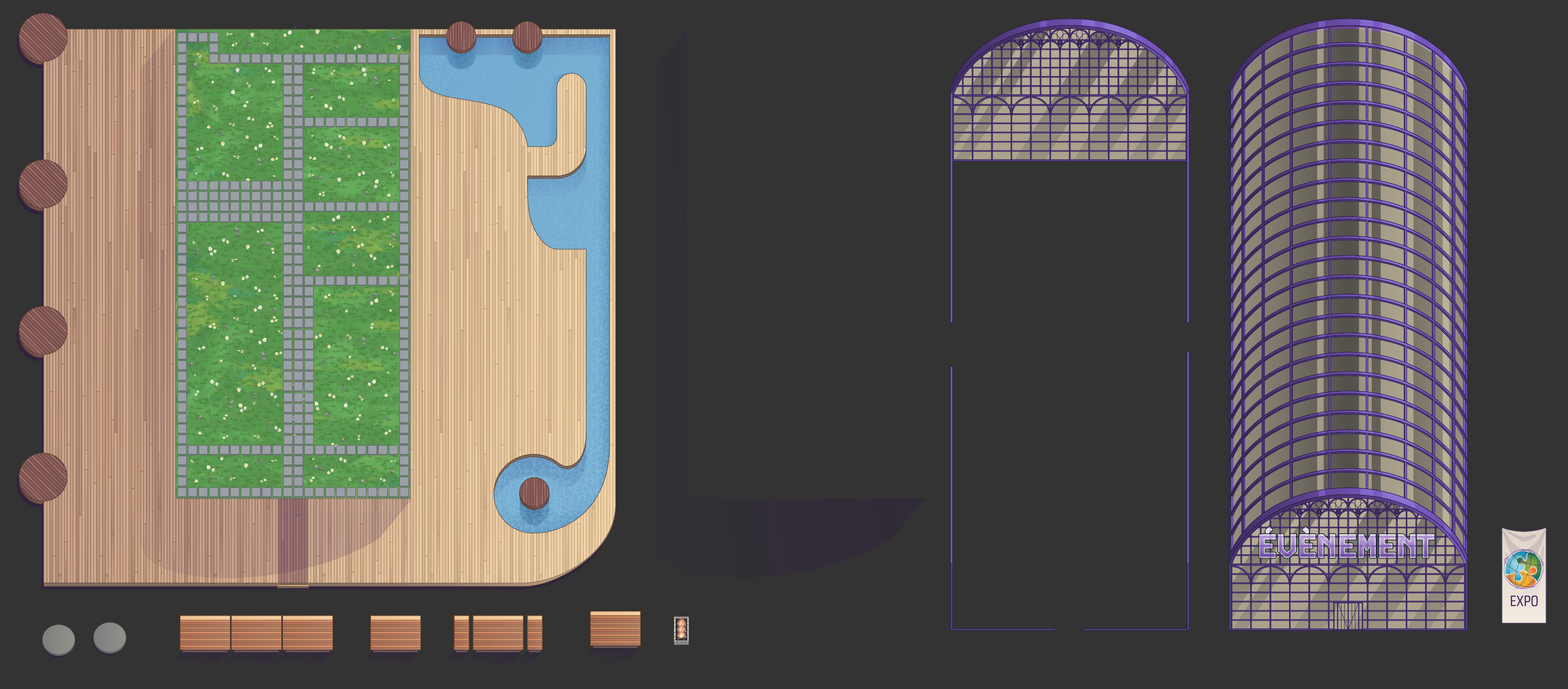
<style>
.page{position:relative;width:1568px;height:689px;background:#333333}
.page>*{position:absolute;margin:0}
.t1{font:32.7px "Video-Bold";text-transform:uppercase}
</style>
<div class="page">
<p class="t1" style="left:1260px;top:527px;width:174px;height:30px">évènement</p>
</div>
